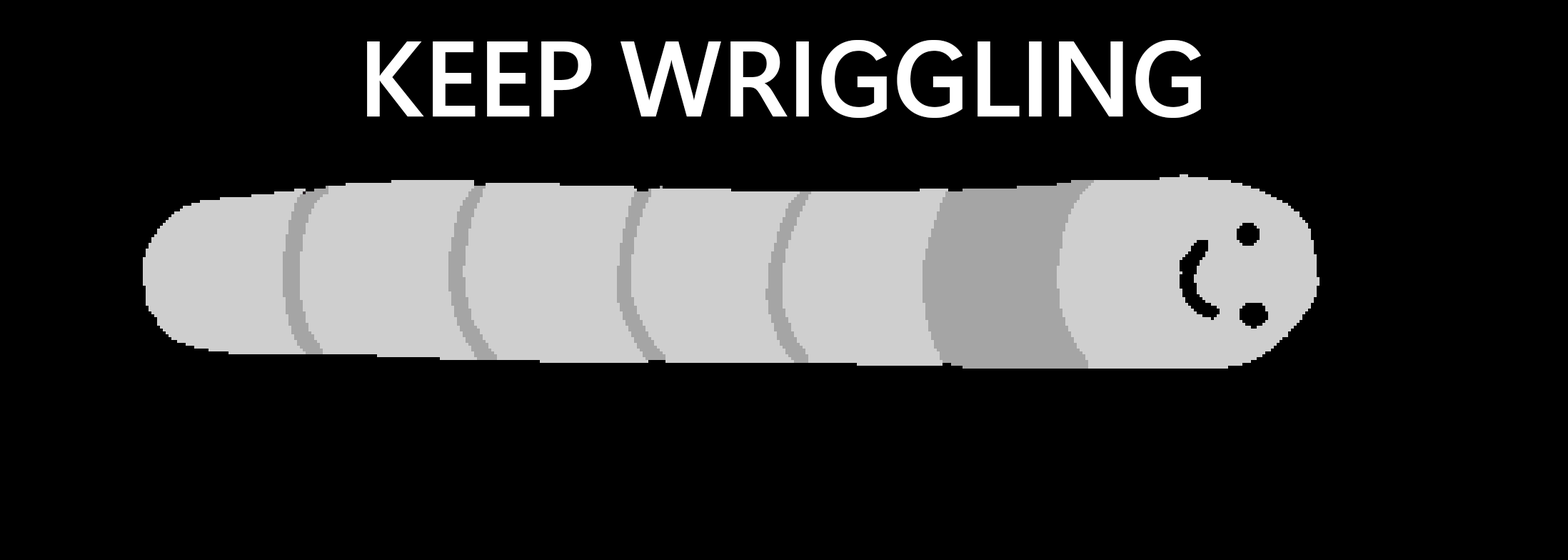
<style>
.page{position:relative;width:1568px;height:560px;background:#000000}
.page>*{position:absolute;margin:0}
.t1{font:107.1px "SegoeUIVariable-SemiboldDisplay";color:#ffffff}
</style>
<div class="page">
<p class="t1" style="left:367px;top:40px;width:834px;height:78px">KEEP WRIGGLING</p>
</div>
